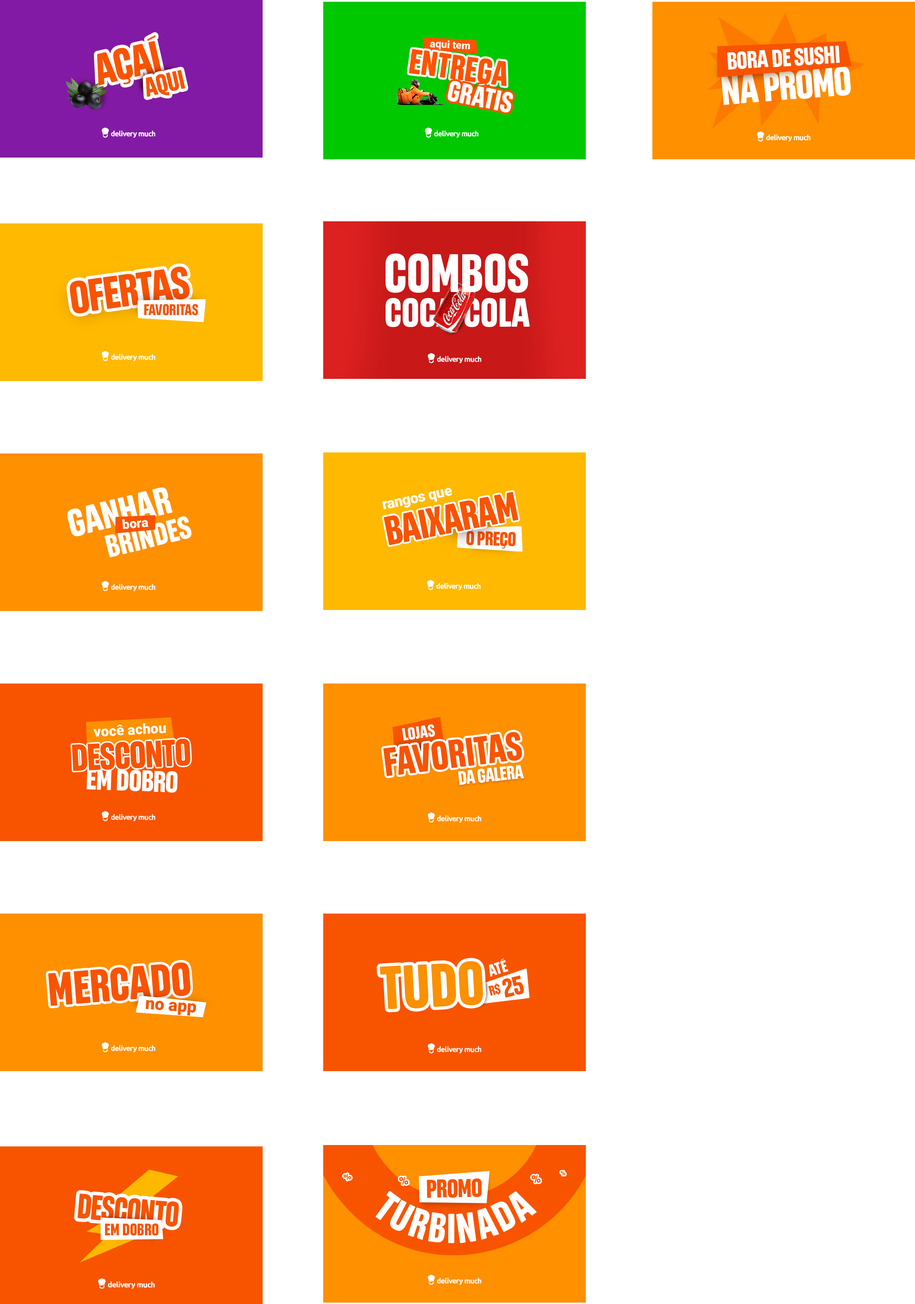
<style>
.page{position:relative;width:915px;height:1304px;background:#ffffff}
.page>*{position:absolute;margin:0}
.t1{font:44.1px "Realce-Blackv0.006";letter-spacing:-0.02em;color:#f85400}
.t2{font:24.4px "Realce-Blackv0.006";letter-spacing:-0.02em;color:#ffffff;text-transform:uppercase}
.t3{font:24.6px "Realce-Blackv0.006";letter-spacing:-0.02em;color:#ffffff;text-transform:uppercase}
.t4{font:26.9px "Realce-Blackv0.006";letter-spacing:-0.02em;color:#f85400}
.t5{font:40.6px "Realce-Blackv0.006";letter-spacing:-0.02em;color:#ffffff;text-transform:uppercase}
.t6{font:54px "Realce-Blackv0.006";color:#ffffff;text-transform:uppercase}
.t7{font:45.6px "Realce-Blackv0.006";letter-spacing:-0.02em;color:#f85400}
.t8{font:15.7px "Realce-Blackv0.006";color:#f85400}
.t9{font:40.6px "Realce-Blackv0.006";color:#ffffff;text-transform:uppercase}
.t10{font:38.6px "Realce-Blackv0.006";color:#ffffff;text-transform:uppercase}
.t11{font:14.7px "Roboto-Black";letter-spacing:-0.02em;color:#ffffff}
.t12{font:40.8px "Realce-Blackv0.006";letter-spacing:-0.02em;color:#f85400}
.t13{font:31.5px "Realce-Blackv0.006";color:#ffffff;text-transform:uppercase}
.t14{font:12.8px "Roboto-Black";color:#ffffff}
.t15{font:19.8px "Realce-Blackv0.006";letter-spacing:-0.02em;color:#f85400;text-transform:uppercase}
.t16{font:14.2px "Roboto-Black";color:#ffffff}
.t17{font:17.4px "Realce-Blackv0.006";color:#ffffff}
.t18{font:39.9px "Realce-Blackv0.006";color:#f85400}
.t19{font:37.5px "Realce-Blackv0.006";letter-spacing:-0.02em;color:#f85300;text-transform:uppercase}
.t20{font:29.8px "Realce-Blackv0.006";letter-spacing:-0.02em;color:#ffffff;text-transform:uppercase}
.t21{font:19.4px "Realce-Blackv0.006";letter-spacing:-0.02em;color:#ffffff}
.t22{font:46.4px "Realce-Blackv0.006";color:#f85400}
.t23{font:61.2px "Realce-Blackv0.006";color:#fb9000}
.t24{font:16.5px "Realce-Blackv0.006";color:#ffffff}
.t25{font:26.1px "Realce-Blackv0.006";letter-spacing:-0.02em;color:#f85400;text-transform:uppercase}
.t26{font:13.9px "Realce-Blackv0.006";letter-spacing:-0.02em;color:#f85400;text-transform:uppercase}
.t27{font:16.8px "Roboto-Black";color:#f85400}
.t28{font:9.3px "Roboto-Black";letter-spacing:-0.02em;color:#f85400;text-transform:uppercase}
.t29{font:11.9px "Roboto-Black";letter-spacing:-0.02em;color:#f85400;text-transform:uppercase}
.t30{font:25.8px "Realce-Blackv0.006";letter-spacing:-0.02em;color:#f85400;text-transform:uppercase}
.t31{font:5.9px "Roboto-Black";letter-spacing:-0.02em;color:#f85400;text-transform:uppercase}
.t32{font:34.9px "Realce-Blackv0.006";letter-spacing:-0.02em;color:#f85400;text-transform:uppercase;scale:0.92 1}
.t33{font:16.8px "Realce-Blackv0.006";color:#f85400;text-transform:uppercase}
</style>
<div class="page">
<p class="t1" style="left:97px;top:35px;width:64px;height:50px;rotate:-13deg">AÇAÍ</p>
<p class="t2" style="left:727px;top:50px;width:41px;height:20px;rotate:-4deg">bora</p>
<p class="t3" style="left:772px;top:46px;width:67px;height:21px;rotate:-4deg">de sushi</p>
<p class="t4" style="left:146px;top:70px;width:39px;height:27px;rotate:-13deg">AQUI</p>
<p class="t5" style="left:721px;top:66px;width:130px;height:39px;rotate:-5deg">na promo</p>
<p class="t6" style="left:385px;top:253px;width:143px;height:40px">combos</p>
<p class="t7" style="left:70px;top:266px;width:120px;height:47px;rotate:-8deg">OFERTAS</p>
<p class="t8" style="left:144px;top:304px;width:54px;height:11px">FAVORITAS</p>
<p class="t9" style="left:385px;top:298px;width:145px;height:29px">coca-cola</p>
<p class="t10" style="left:67px;top:487px;width:106px;height:49px;rotate:-14deg">ganhar</p>
<p class="t11" style="left:382px;top:488px;width:70px;height:21px;rotate:-12deg">rangos que</p>
<p class="t12" style="left:384px;top:491px;width:134px;height:54px;rotate:-11deg">BAIXARAM</p>
<p class="t13" style="left:104px;top:516px;width:87px;height:41px;rotate:-14deg">brindes</p>
<p class="t14" style="left:122px;top:519px;width:26px;height:10px;rotate:-5deg">bora</p>
<p class="t15" style="left:466px;top:531px;width:50px;height:18px;rotate:2deg">O PREÇO</p>
<p class="t16" style="left:93px;top:723px;width:73px;height:14px;rotate:-3deg">você achou</p>
<p class="t17" style="left:402px;top:724px;width:33px;height:16px;rotate:-8deg">LOJAS</p>
<p class="t18" style="left:383px;top:732px;width:139px;height:44px;rotate:-7deg">FAVORITAS</p>
<p class="t19" style="left:72px;top:738px;width:118px;height:33px;rotate:-3deg">desconto</p>
<p class="t20" style="left:86px;top:768px;width:91px;height:25px;rotate:2deg">em dobro</p>
<p class="t21" style="left:458px;top:765px;width:66px;height:20px;rotate:-6deg">DA GALERA</p>
<p class="t22" style="left:48px;top:962px;width:142px;height:44px;rotate:-5deg">MERCADO</p>
<p class="t23" style="left:379px;top:961px;width:104px;height:48px;rotate:-3deg">TUDO</p>
<p class="t24" style="left:489px;top:958px;width:19px;height:18px;rotate:-16deg">ATÉ</p>
<p class="t25" style="left:502px;top:975px;width:22px;height:22px;rotate:-14deg">25</p>
<p class="t26" style="left:488px;top:982px;width:13px;height:14px;rotate:-14deg">R$</p>
<p class="t27" style="left:146px;top:1000px;width:50px;height:16px;rotate:4deg">no app</p>
<p class="t28" style="left:343px;top:1173px;width:8px;height:7px;rotate:-30deg">%</p>
<p class="t29" style="left:399px;top:1177px;width:9px;height:8px;rotate:-15deg">%</p>
<p class="t30" style="left:427px;top:1178px;width:55px;height:20px;rotate:-1deg">promo</p>
<p class="t29" style="left:531px;top:1175px;width:9px;height:8px;rotate:-15deg">%</p>
<p class="t31" style="left:560px;top:1171px;width:5px;height:4px;rotate:-15deg">%</p>
<p class="t32" style="left:77px;top:1193px;width:102px;height:33px;rotate:5deg">DESCONTO</p>
<p class="t33" style="left:105px;top:1223px;width:54px;height:12px">EM DOBRO</p>
</div>
